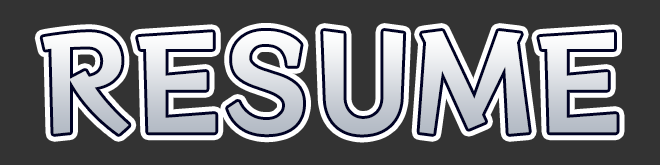
<style>
.page{position:relative;width:660px;height:165px;background:#333333}
.page>*{position:absolute;margin:0}
.t1{font:125px "RocknRollOne-Regular";font-weight:bold}
</style>
<div class="page">
<p class="t1" style="left:42px;top:31px;width:575px;height:104px">RESUME</p>
</div>
